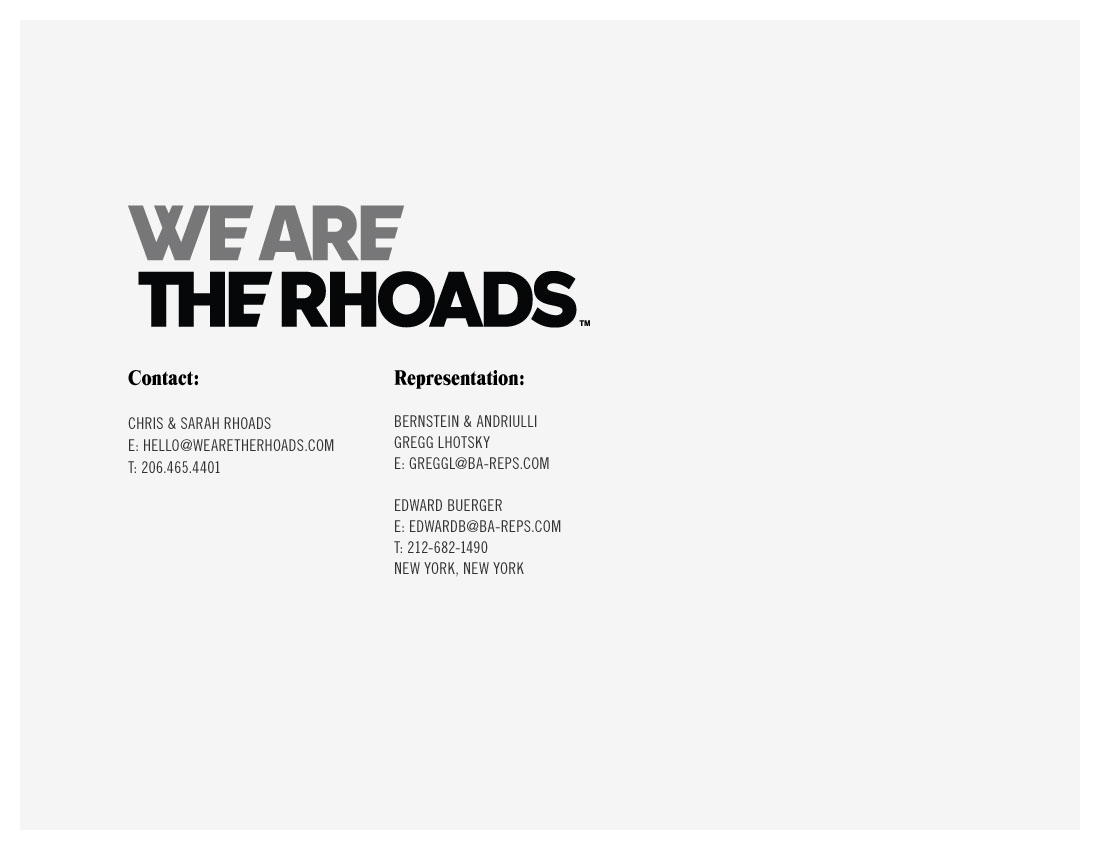
<style>
.page{position:relative;width:1100px;height:850px;background:#f5f5f5}
.page>*{position:absolute;margin:0}
.t1{font:16px/22px "TradeGothicLTStd-Cn18";letter-spacing:0.02em;color:#333333}
.t2{font:22px/22px "TimesModernEF";color:#000000}
.t3{font:16px/21px "TradeGothicLTStd-Cn18";letter-spacing:0.02em;color:#333333}
.t4{font:22px/21px "TimesModernEF";color:#000000}
</style>
<div class="page">
<p class="t1" style="left:128px;top:370px;width:206px;height:103px"><span class="t2">Contact:<br><br></span>CHRIS &amp; SARAH RHOADS<br>E: HELLO@WEARETHERHOADS.COM<br>T: 206.465.4401</p>
<p class="t3" style="left:394px;top:370px;width:167px;height:207px"><span class="t4">Representation:<br><br></span>BERNSTEIN &amp; ANDRIULLI<br>GREGG LHOTSKY<br>E: GREGGL@BA-REPS.COM<br><br>EDWARD BUERGER<br>E: EDWARDB@BA-REPS.COM<br>T: 212-682-1490<br>NEW YORK, NEW YORK</p>
</div>
